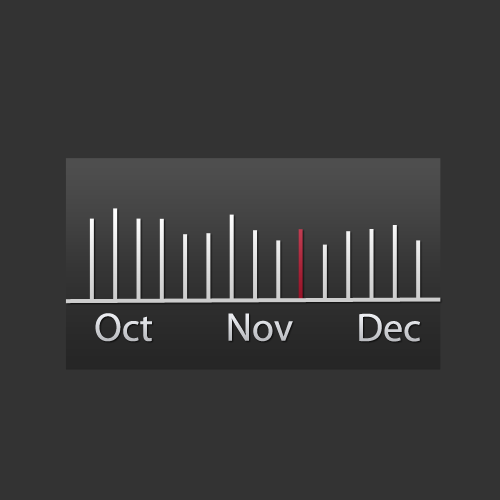
<style>
.page{position:relative;width:500px;height:500px;background:#333333}
.page>*{position:absolute;margin:0}
.t1{font:40px "MyriadPro-Regular";color:#d1d2d6}
.t2{font:40px "MyriadPro-Regular";color:#cfd0d4}
</style>
<div class="page">
<p class="t1" style="left:95px;top:313px;width:57px;height:29px">Oct</p>
<p class="t2" style="left:228px;top:313px;width:65px;height:29px">Nov</p>
<p class="t2" style="left:359px;top:313px;width:61px;height:29px">Dec</p>
</div>
